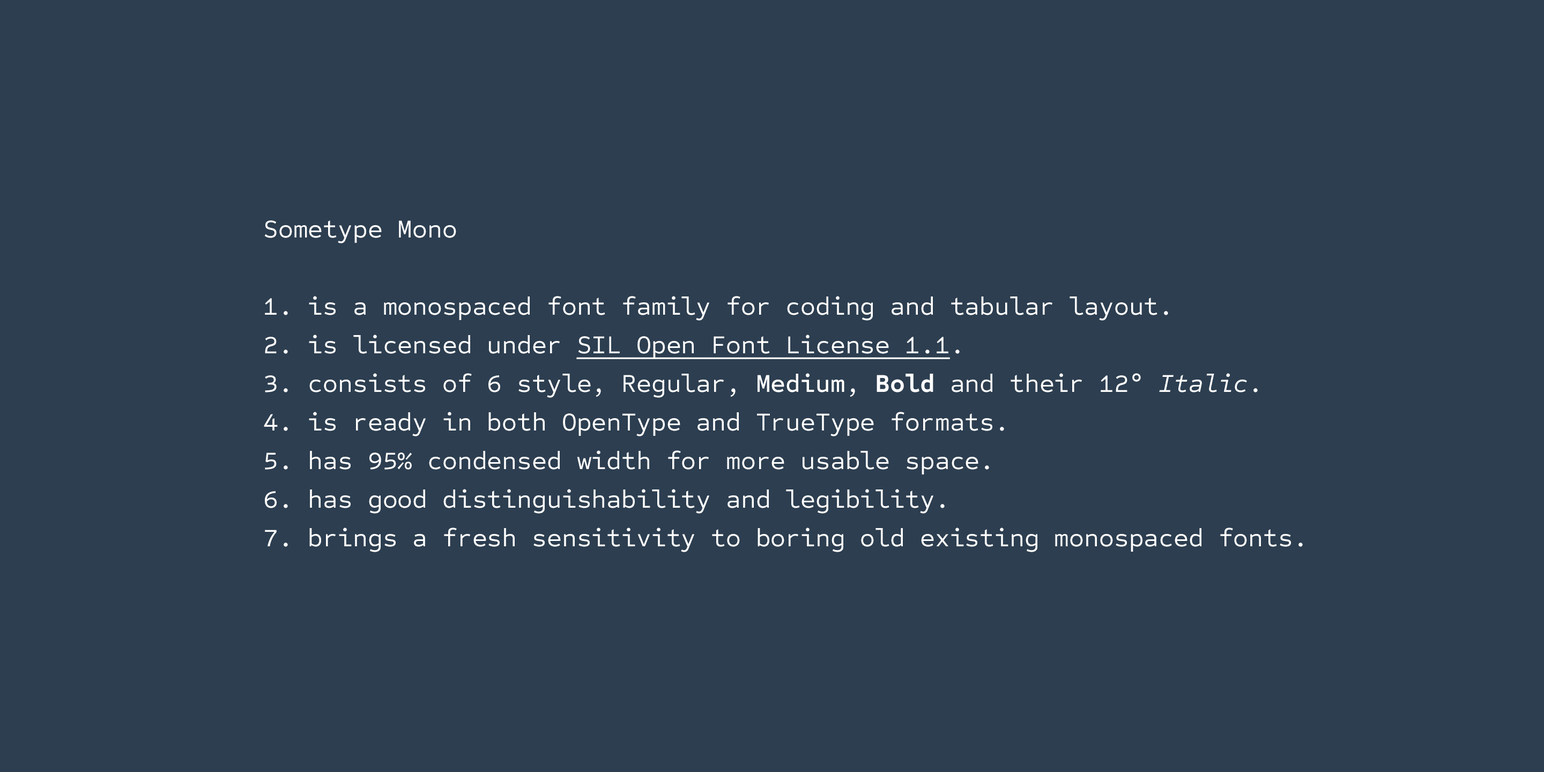
<style>
.page{position:relative;width:1544px;height:772px;background:#2c3e50}
.page>*{position:absolute;margin:0}
.t1{font:25.7px/38.6px "SometypeMono-Regular";color:#ffffff}
.t2{font:25.7px/38.6px "SometypeMono-Regular";color:#ffffff;text-decoration:underline}
.t3{font:25.7px/38.6px "SometypeMono-Medium";color:#ffffff}
.t4{font:25.7px/38.6px "SometypeMono-Bold";color:#ffffff}
.t5{font:25.7px/38.6px "SometypeMono-RegularItalic";color:#ffffff}
</style>
<div class="page">
<p class="t1" style="left:264px;top:220px;width:1039px;height:332px">Sometype Mono                                                          <br>                                                                      <br>1. is a monospaced font family for coding and tabular layout. <br>2. is licensed under <span class="t2">SIL Open Font License 1.1</span>.                 <br>3. consists of 6 style, Regular, <span class="t3">Medium</span>, <span class="t4">Bold </span>and their 12° <span class="t5">Italic</span>. <br>4. is ready in both OpenType and TrueType formats.                        <br>5. has 95% condensed width for more usable space.                   <br>6. has good distinguishability and legibility.          <br>7. brings a fresh sensitivity to boring old existing monospaced fonts.</p>
</div>
